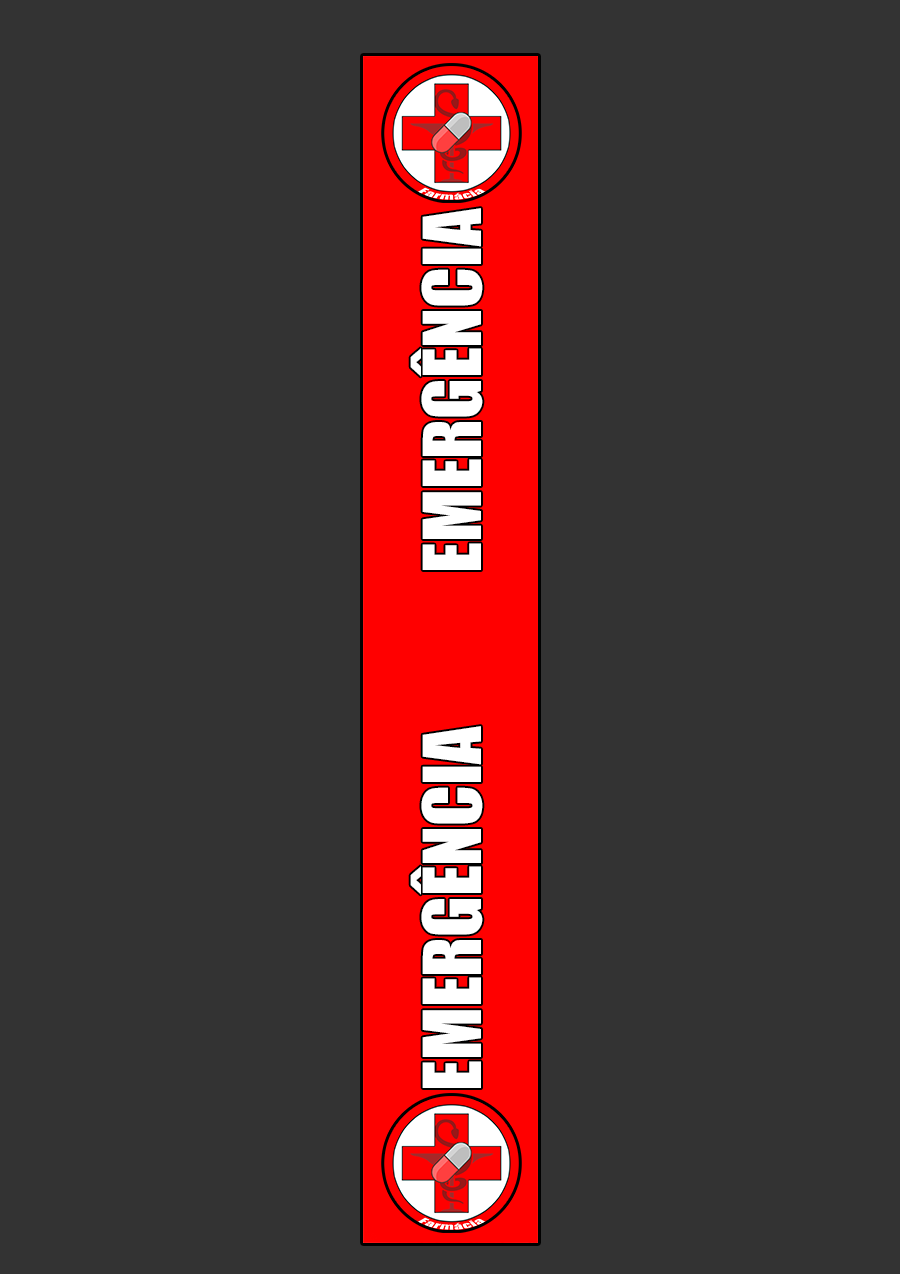
<style>
.page{position:relative;width:900px;height:1274px;background:#333333}
.page>*{position:absolute;margin:0}
.t1{font:73.7px "Impact";color:#ffffff}
</style>
<div class="page">
<p class="t1" style="left:410px;top:208px;width:73px;height:362px;rotate:-90deg">EMERGÊNCIA</p>
<p class="t1" style="left:410px;top:726px;width:73px;height:362px;rotate:-90deg">EMERGÊNCIA</p>
</div>
